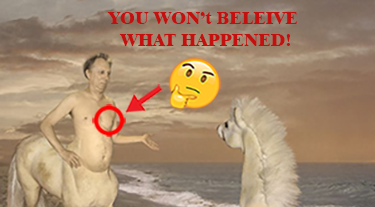
<style>
.page{position:relative;width:375px;height:207px}
.page>*{position:absolute;margin:0}
.t1{font:18.2px "Dutch801BT-ExtraBold";color:#c51010}
</style>
<div class="page">
<p class="t1" style="left:107px;top:12px;width:191px;height:34px;text-align:center">YOU WON’t BELEIVE <br>WHAT HAPPENED!</p>
</div>
